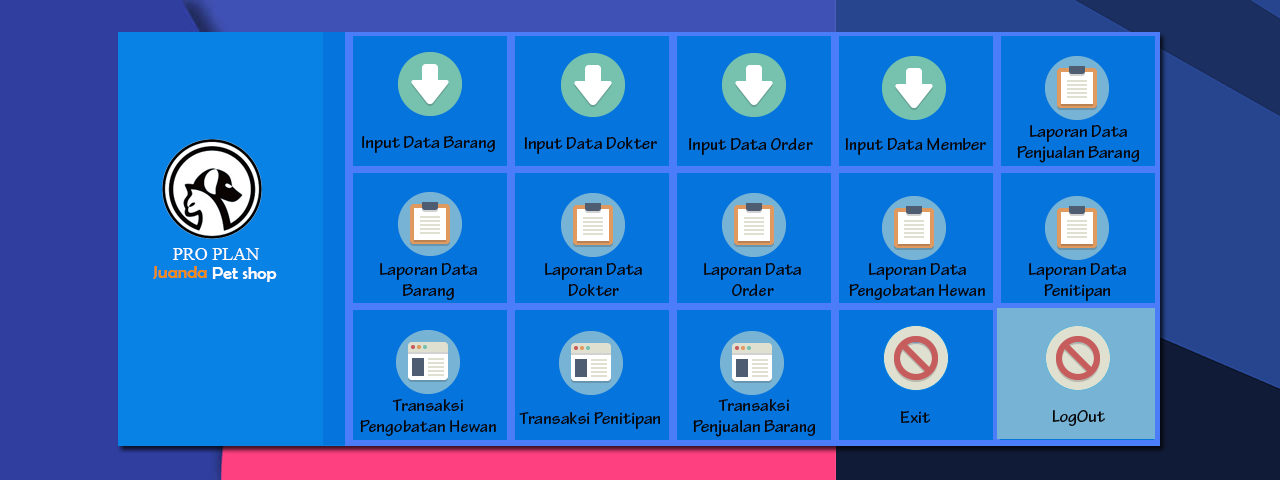
<style>
.page{position:relative;width:1280px;height:480px;background:#0674dd}
.page>*{position:absolute;margin:0}
.t1{font:18px "TektonPro-Bold";color:#070707}
.t2{font:18px "TimesNewRomanPSMT";color:#fefefe}
.t3{font:18px "BerlinSansFB-Reg";color:#f08a11}
.t4{font:18px "BerlinSansFB-Reg";color:#fefefe}
</style>
<div class="page">
<p class="t1" style="left:1017px;top:125px;width:122px;height:38px;text-align:center">Laporan Data <br>Penjualan Barang</p>
<p class="t1" style="left:362px;top:136px;width:133px;height:17px">Input Data Barang</p>
<p class="t1" style="left:524px;top:137px;width:133px;height:17px">Input Data Dokter</p>
<p class="t1" style="left:689px;top:138px;width:124px;height:17px">Input Data Order</p>
<p class="t1" style="left:845px;top:138px;width:141px;height:17px">Input Data Member</p>
<p class="t2" style="left:173px;top:248px;width:87px;height:12px">PRO PLAN</p>
<p class="t3" style="left:153px;top:266px;width:54px;height:13px">Juanda</p>
<p class="t4" style="left:212px;top:267px;width:65px;height:15px">Pet shop</p>
<p class="t1" style="left:380px;top:263px;width:97px;height:37px;text-align:center">Laporan Data <br>Barang</p>
<p class="t1" style="left:545px;top:263px;width:97px;height:33px;text-align:center">Laporan Data <br>Dokter</p>
<p class="t1" style="left:704px;top:263px;width:97px;height:33px;text-align:center">Laporan Data <br>Order</p>
<p class="t1" style="left:849px;top:263px;width:136px;height:37px;text-align:center">Laporan Data <br>Pengobatan Hewan</p>
<p class="t1" style="left:1029px;top:263px;width:97px;height:38px;text-align:center">Laporan Data <br>Penitipan</p>
<p class="t1" style="left:360px;top:399px;width:136px;height:37px;text-align:center">Transaksi <br>Pengobatan Hewan</p>
<p class="t1" style="left:693px;top:399px;width:122px;height:38px;text-align:center">Transaksi <br>Penjualan Barang</p>
<p class="t1" style="left:519px;top:412px;width:141px;height:17px">Transaksi Penitipan</p>
<p class="t1" style="left:901px;top:411px;width:30px;height:12px">Exit</p>
<p class="t1" style="left:1052px;top:410px;width:53px;height:16px">LogOut</p>
</div>
